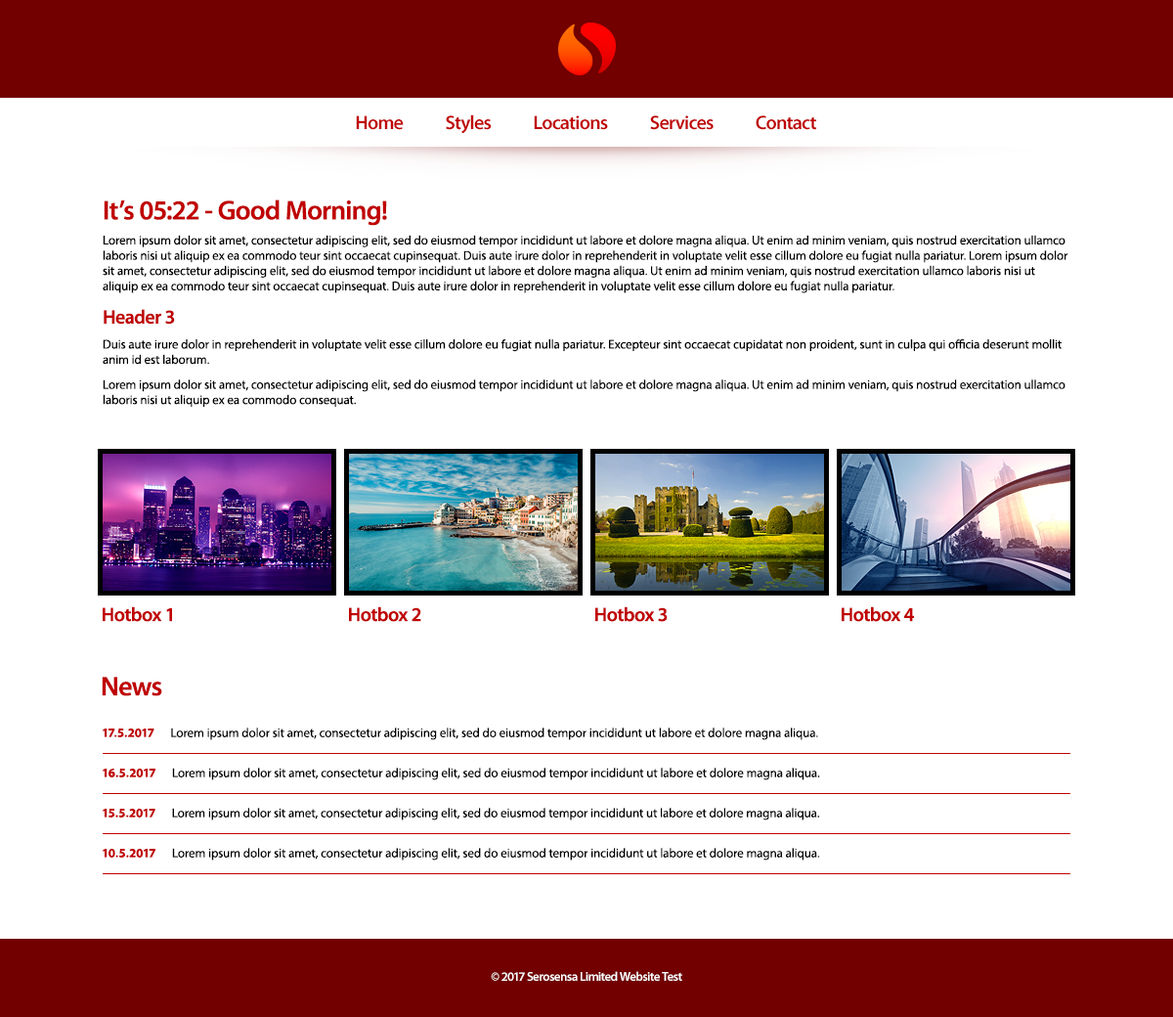
<style>
.page{position:relative;width:1173px;height:1017px;background:#ffffff}
.page>*{position:absolute;margin:0}
.t1{font:19.5px "MyriadPro-Semibold";letter-spacing:-0.04em;color:#c00000}
.t2{font:12.7px "MyriadPro-Regular";color:#000000}
.t3{font:27.4px "MyriadPro-Semibold";letter-spacing:-0.02em;color:#c00000}
.t4{font:19.5px "MyriadPro-Semibold";letter-spacing:-0.02em;color:#c00000}
.t5{font:12.7px "MyriadPro-Bold";color:#c00000}
.t6{font:12.7px "MyriadPro-Semibold";letter-spacing:-0.04em;color:#ffffff}
</style>
<div class="page">
<p class="t1" style="left:356px;top:114px;width:460px;height:20px">Home             Styles             Locations             Services             Contact</p>
<p class="t2" style="left:103px;top:199px;width:965px;height:208px"><span class="t3">It’s 05:22 - Good Morning!<br></span>Lorem ipsum dolor sit amet, consectetur adipiscing elit, sed do eiusmod tempor incididunt ut labore et dolore magna aliqua. Ut enim ad minim veniam, quis nostrud exercitation ullamco laboris nisi ut aliquip ex ea commodo teur sint occaecat cupinsequat. Duis aute irure dolor in reprehenderit in voluptate velit esse cillum dolore eu fugiat nulla pariatur. Lorem ipsum dolor sit amet, consectetur adipiscing elit, sed do eiusmod tempor incididunt ut labore et dolore magna aliqua. Ut enim ad minim veniam, quis nostrud exercitation ullamco laboris nisi ut aliquip ex ea commodo teur sint occaecat cupinsequat. Duis aute irure dolor in reprehenderit in voluptate velit esse cillum dolore eu fugiat nulla pariatur. <br><span class="t4">Header 3<br></span>Duis aute irure dolor in reprehenderit in voluptate velit esse cillum dolore eu fugiat nulla pariatur. Excepteur sint occaecat cupidatat non proident, sunt in culpa qui officia deserunt mollit anim id est laborum.<br>Lorem ipsum dolor sit amet, consectetur adipiscing elit, sed do eiusmod tempor incididunt ut labore et dolore magna aliqua. Ut enim ad minim veniam, quis nostrud exercitation ullamco laboris nisi ut aliquip ex ea commodo consequat.</p>
<p class="t4" style="left:103px;top:606px;width:69px;height:16px">Hotbox 1</p>
<p class="t4" style="left:349px;top:606px;width:72px;height:16px">Hotbox 2</p>
<p class="t4" style="left:595px;top:606px;width:73px;height:16px">Hotbox 3</p>
<p class="t4" style="left:842px;top:606px;width:72px;height:16px">Hotbox 4</p>
<p class="t3" style="left:102px;top:676px;width:60px;height:20px">News</p>
<p class="t2" style="left:103px;top:727px;width:715px;height:13px"><span class="t5">17.5.2017</span>      Lorem ipsum dolor sit amet, consectetur adipiscing elit, sed do eiusmod tempor incididunt ut labore et dolore magna aliqua.</p>
<p class="t2" style="left:103px;top:767px;width:717px;height:13px"><span class="t5">16.5.2017</span>      Lorem ipsum dolor sit amet, consectetur adipiscing elit, sed do eiusmod tempor incididunt ut labore et dolore magna aliqua.</p>
<p class="t2" style="left:103px;top:807px;width:717px;height:13px"><span class="t5">15.5.2017</span>      Lorem ipsum dolor sit amet, consectetur adipiscing elit, sed do eiusmod tempor incididunt ut labore et dolore magna aliqua.</p>
<p class="t2" style="left:103px;top:847px;width:717px;height:13px"><span class="t5">10.5.2017</span>      Lorem ipsum dolor sit amet, consectetur adipiscing elit, sed do eiusmod tempor incididunt ut labore et dolore magna aliqua.</p>
<p class="t6" style="left:491px;top:971px;width:191px;height:9px">© 2017 Serosensa Limited Website Test</p>
</div>
